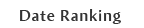
<style>
.page{position:relative;width:144px;height:28px;background:#ffffff}
.page>*{position:absolute;margin:0}
.t1{font:16px "AmiraParadiso";letter-spacing:0.05em;color:#333333}
</style>
<div class="page">
<p class="t1" style="left:20px;top:9px;width:101px;height:15px">Date Ranking</p>
</div>
